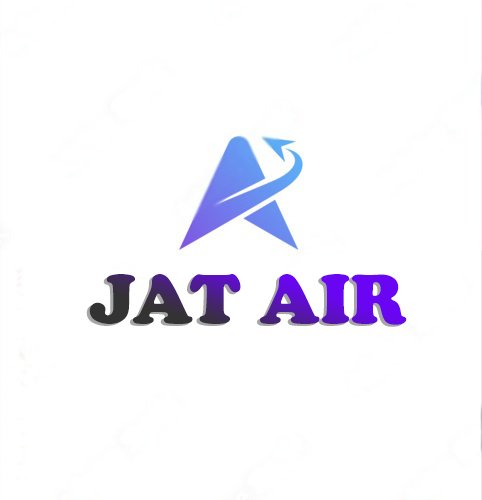
<style>
.page{position:relative;width:482px;height:500px;background:#ffffff}
.page>*{position:absolute;margin:0}
.t1{font:72px "CooperBlack";letter-spacing:0.01em}
</style>
<div class="page">
<p class="t1" style="left:89px;top:274px;width:318px;height:51px">JAT AIR</p>
</div>
